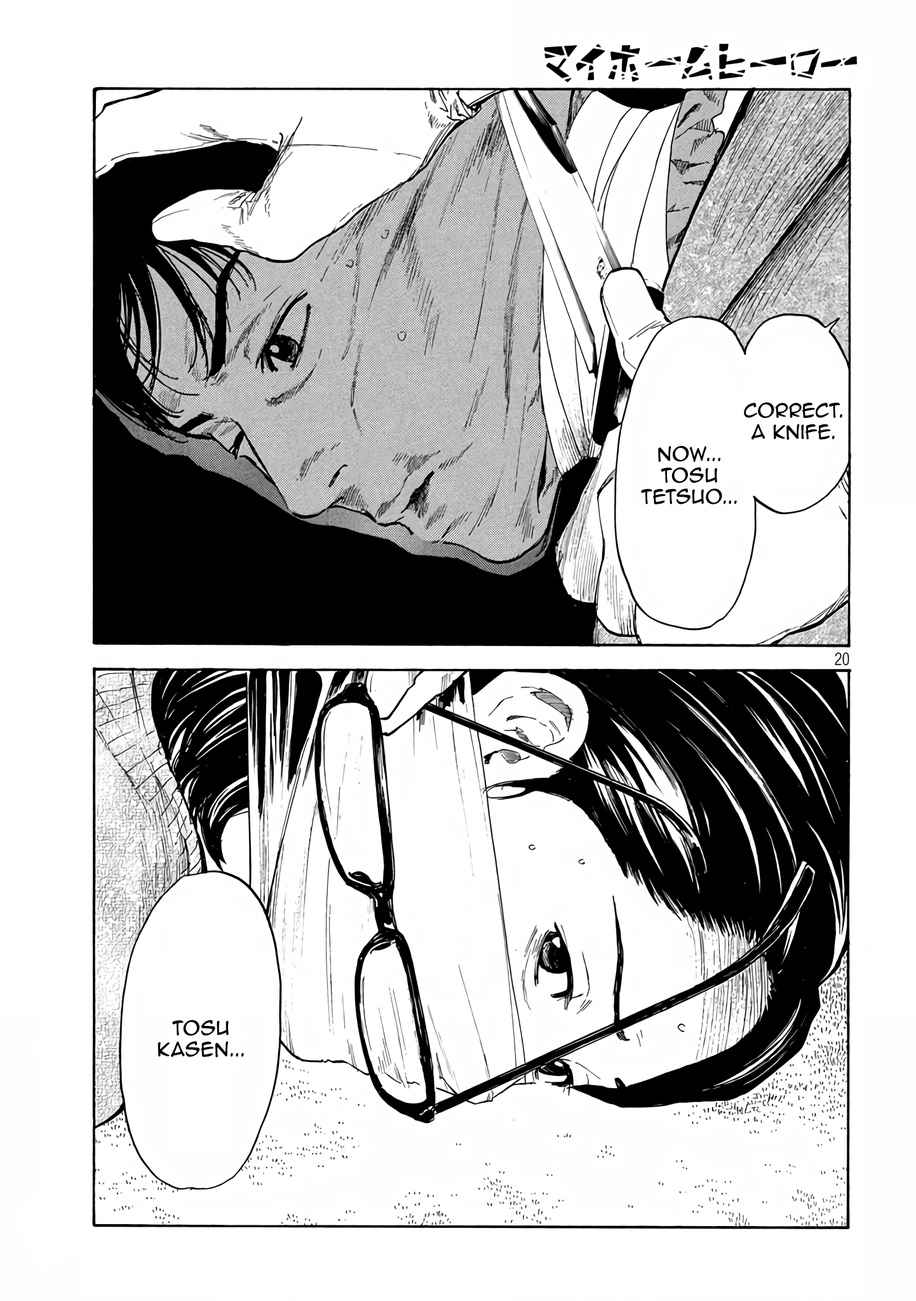
<style>
.page{position:relative;width:916px;height:1301px;background:#ffffff}
.page>*{position:absolute;margin:0}
.t1{font:17.8px "AnimeAce2.0BB";color:#000000}
</style>
<div class="page">
<p class="t1" style="left:744px;top:402px;width:99px;height:38px;text-align:center">Correct.<br>A knife.</p>
<p class="t1" style="left:641px;top:446px;width:96px;height:59px;text-align:center">Now... Tosu Tetsuo...</p>
<p class="t1" style="left:158px;top:1020px;width:86px;height:38px;text-align:center">Tosu Kasen...</p>
</div>
